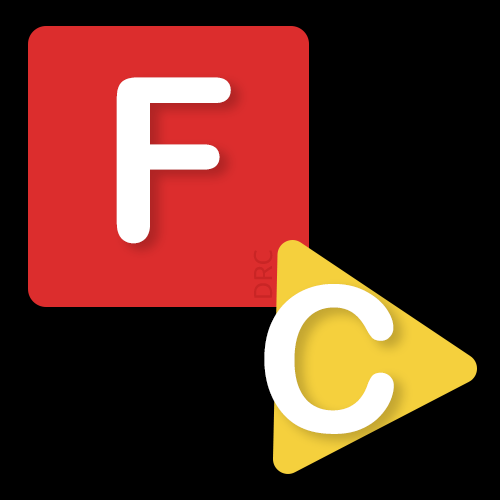
<style>
.page{position:relative;width:500px;height:500px;background:#000000}
.page>*{position:absolute;margin:0}
.t1{font:227.6px "ArialRoundedMTBold";color:#ffffff}
.t2{font:25.8px "Ubuntu-Regular";color:#c92525}
.t3{font:202.4px "ArialRoundedMTBold";color:#ffffff}
</style>
<div class="page">
<p class="t1" style="left:116px;top:77px;width:115px;height:167px">F</p>
<p class="t2" style="left:253px;top:250px;width:20px;height:48px;rotate:-90deg">DRC</p>
<p class="t3" style="left:264px;top:284px;width:130px;height:150px">C</p>
</div>
